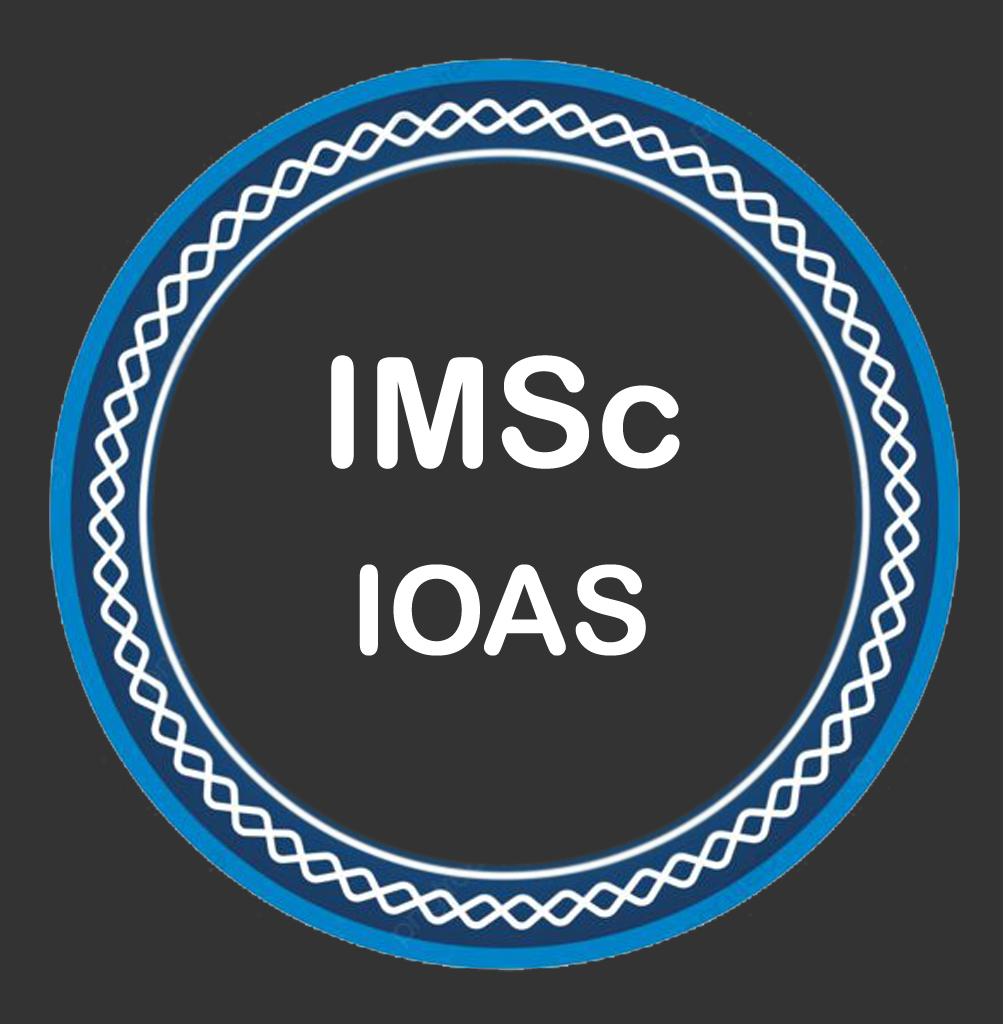
<style>
.page{position:relative;width:1003px;height:1024px;background:#333333}
.page>*{position:absolute;margin:0}
.t1{font:152.9px "ArialRoundedMTBold";color:#ffffff}
.t2{font:122.9px "ArialRoundedMTBold";color:#ffffff}
</style>
<div class="page">
<p class="t1" style="left:331px;top:355px;width:349px;height:114px">IMSc</p>
<p class="t2" style="left:359px;top:564px;width:287px;height:92px">IOAS</p>
</div>
